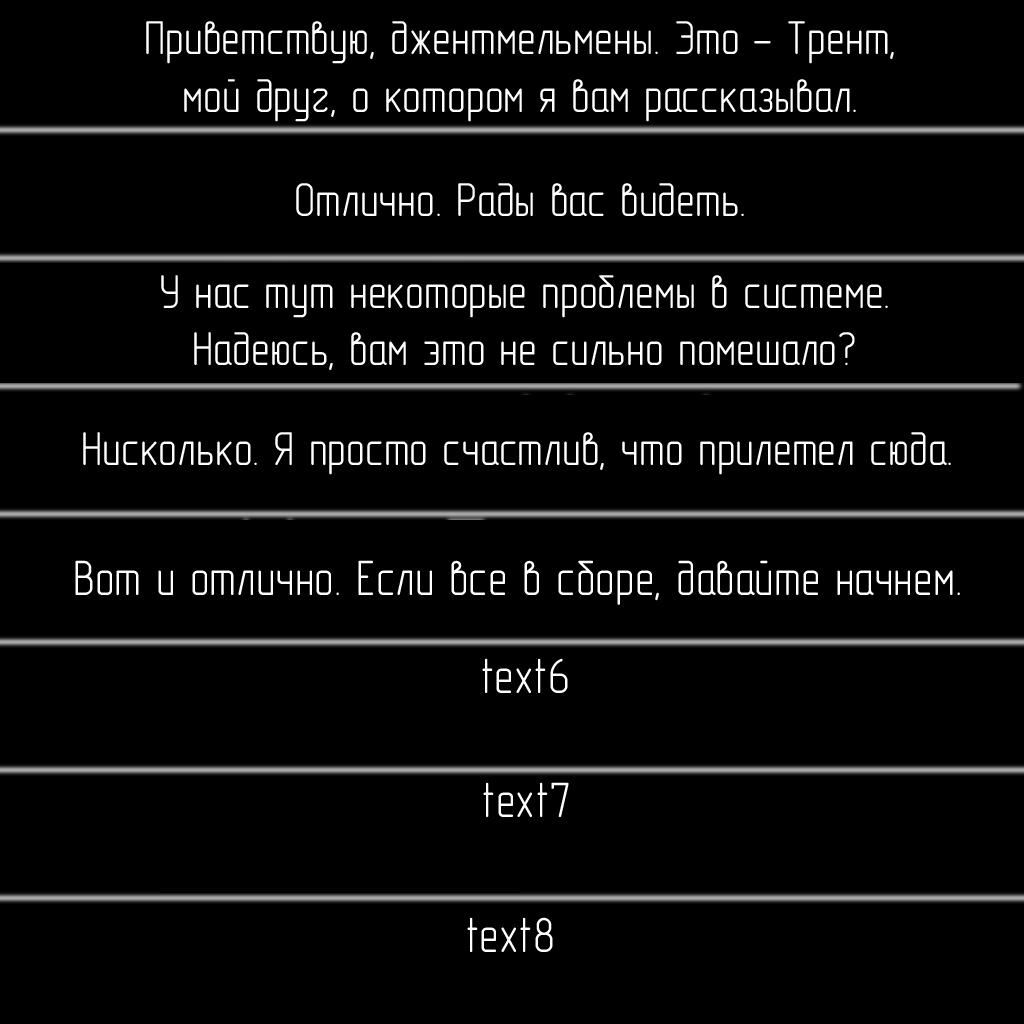
<style>
.page{position:relative;width:1024px;height:1024px;background:#000000}
.page>*{position:absolute;margin:0}
.t1{font:48px "GOST-2.304-81typeA";color:#ffffff}
.t2{font:50px "GOST-2.304-81typeA";color:#ffffff}
</style>
<div class="page">
<p class="t1" style="left:146px;top:21px;width:748px;height:101px;text-align:center">Приветствую, джентмельмены. Это - Трент,<br>мой друг, о котором я вам рассказывал.</p>
<p class="t1" style="left:296px;top:183px;width:448px;height:33px">Отлично. Рады вас видеть.</p>
<p class="t1" style="left:161px;top:275px;width:727px;height:95px;text-align:center">У нас тут некоторые проблемы в системе.<br>Надеюсь, вам это не сильно помешало?</p>
<p class="t1" style="left:83px;top:432px;width:868px;height:43px">Нисколько. Я просто счастлив, что прилетел сюда.</p>
<p class="t2" style="left:75px;top:560px;width:885px;height:45px">Вот и отлично. Если все в сборе, давайте начнем.</p>
<p class="t2" style="left:482px;top:658px;width:86px;height:35px">text6</p>
<p class="t2" style="left:483px;top:782px;width:86px;height:35px">text7</p>
<p class="t2" style="left:467px;top:917px;width:86px;height:35px">text8</p>
</div>
